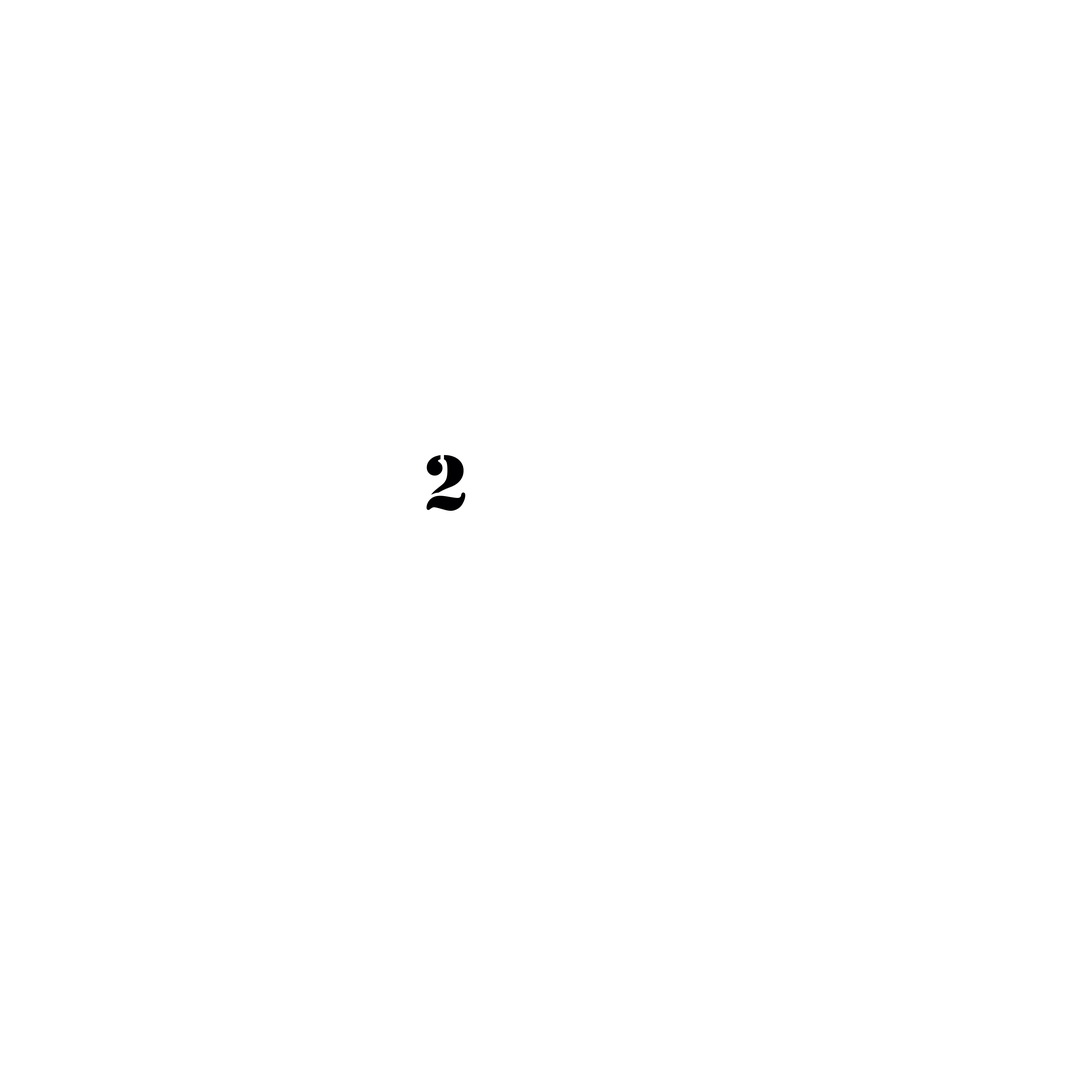
<style>
.page{position:relative;width:1092px;height:1092px;background:#ffffff}
.page>*{position:absolute;margin:0}
.t1{font:81.9px "Stencil";color:#000002}
</style>
<div class="page">
<p class="t1" style="left:426px;top:455px;width:39px;height:56px">2</p>
</div>
